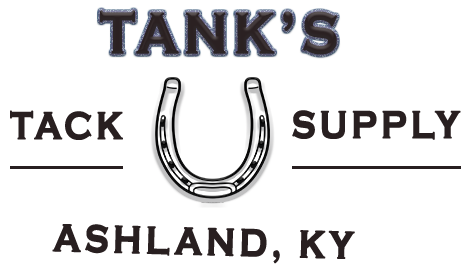
<style>
.page{position:relative;width:464px;height:265px;background:#ffffff}
.page>*{position:absolute;margin:0}
.t1{font:60px "CopperplateGothic-Bold";letter-spacing:0.1em;color:#281f20;text-transform:uppercase;font-weight:bold;scale:0.83 1}
.t2{font:40px "CopperplateGothic-Bold";letter-spacing:0.1em;color:#281f20;text-transform:uppercase;font-weight:bold;scale:0.83 1}
</style>
<div class="page">
<p class="t1" style="left:100px;top:10px;width:237px;height:45px">TANK’S</p>
<p class="t2" style="left:10px;top:110px;width:113px;height:30px">TACK</p>
<p class="t2" style="left:292px;top:110px;width:169px;height:30px">SUPPLY</p>
<p class="t2" style="left:52px;top:224px;width:303px;height:40px;rotate:1deg">ASHLAND, KY</p>
</div>
